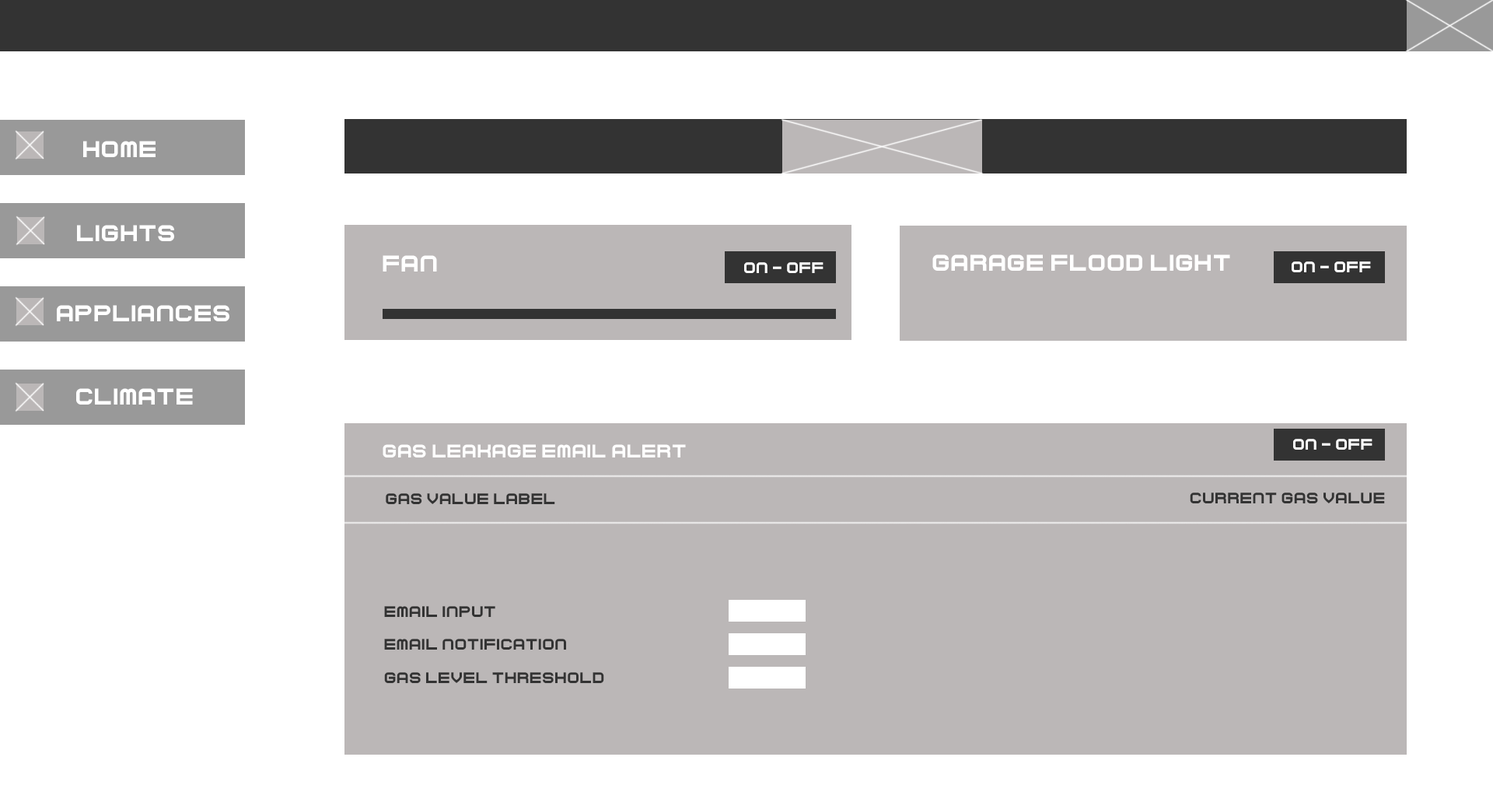
<style>
.page{position:relative;width:1493px;height:799px;background:#ffffff}
.page>*{position:absolute;margin:0}
.t1{font:23.3px "Curvert";color:#ffffff}
.t2{font:15.6px "Curvert";color:#ffffff}
.t3{font:18.7px "Curvert";color:#ffffff}
.t4{font:15.6px "Curvert";color:#333333}
</style>
<div class="page">
<p class="t1" style="left:83px;top:141px;width:73px;height:16px">Home</p>
<p class="t1" style="left:77px;top:225px;width:97px;height:16px">LIGHTS</p>
<p class="t1" style="left:383px;top:255px;width:54px;height:16px">FAN</p>
<p class="t1" style="left:932px;top:254px;width:298px;height:17px">GARAGE FLOOD LIGHT</p>
<p class="t2" style="left:744px;top:262px;width:80px;height:11px">ON - OFF</p>
<p class="t2" style="left:1292px;top:261px;width:79px;height:11px">ON - OFF</p>
<p class="t1" style="left:57px;top:305px;width:172px;height:16px">APPLIANCES</p>
<p class="t1" style="left:76px;top:388px;width:117px;height:16px">CLIMATE</p>
<p class="t3" style="left:383px;top:444px;width:303px;height:13px">GAS LEAKAGE EMAIL ALERT</p>
<p class="t2" style="left:1293px;top:439px;width:80px;height:10px">ON - OFF</p>
<p class="t4" style="left:386px;top:493px;width:169px;height:11px">GAS VALUE LABEL</p>
<p class="t4" style="left:1190px;top:492px;width:195px;height:11px">CURRENT GAS VALUE</p>
<p class="t4" style="left:384px;top:606px;width:111px;height:11px">EMAIL INPUT</p>
<p class="t4" style="left:384px;top:638px;width:182px;height:11px">EMAIL NOTIFICATION</p>
<p class="t4" style="left:384px;top:672px;width:220px;height:11px">GAS LEVEL THRESHOLD</p>
</div>
